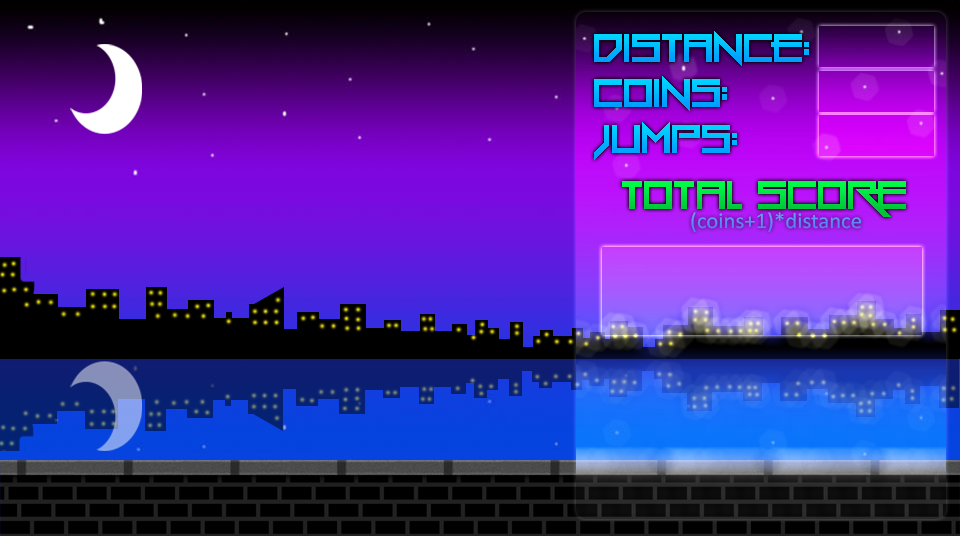
<style>
.page{position:relative;width:960px;height:536px}
.page>*{position:absolute;margin:0}
.t1{font:80px "Gang-Wolfik"}
.t2{font:80.3px "Gang-Wolfik"}
.t3{font:80px "Gang-Wolfik";color:#01e843}
.t4{font:22.3px "Calibri";color:#528fff}
</style>
<div class="page">
<p class="t1" style="left:594px;top:31px;width:215px;height:35px">Distance:</p>
<p class="t1" style="left:594px;top:76px;width:133px;height:35px">Coins:</p>
<p class="t2" style="left:594px;top:122px;width:143px;height:38px">Jumps:</p>
<p class="t3" style="left:622px;top:181px;width:284px;height:36px">Total Score</p>
<p class="t4" style="left:691px;top:212px;width:171px;height:20px;opacity:0.6">(coins+1)*distance</p>
</div>
